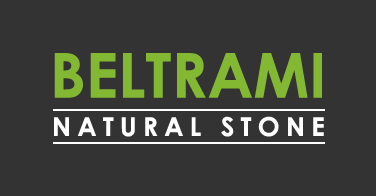
<style>
.page{position:relative;width:376px;height:196px;background:#333333}
.page>*{position:absolute;margin:0}
.t1{font:62px "CenturyGothic-Bold";color:#83b932}
.t2{font:26px "CenturyGothic-Bold";letter-spacing:0.24em;color:#ffffff}
</style>
<div class="page">
<p class="t1" style="left:54px;top:53px;width:268px;height:45px">BELTRAMI</p>
<p class="t2" style="left:54px;top:116px;width:270px;height:21px">NATURAL STONE</p>
</div>
